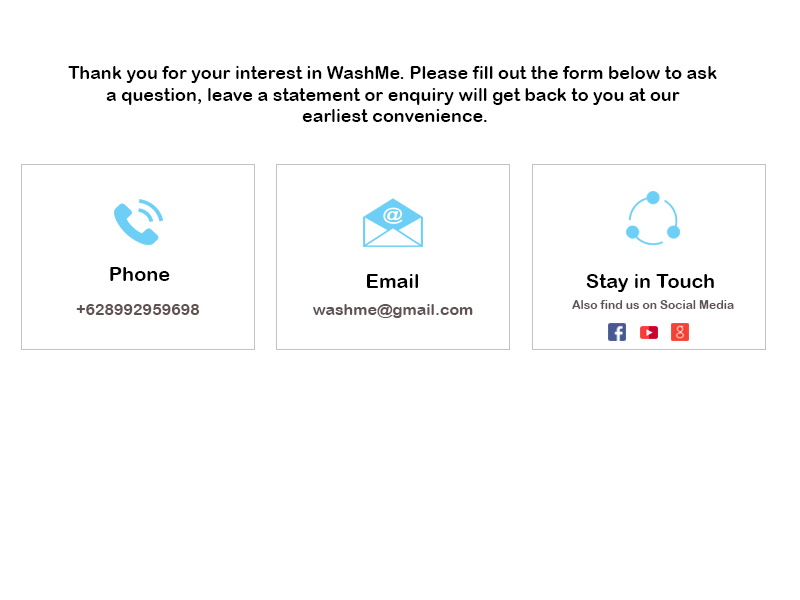
<style>
.page{position:relative;width:800px;height:600px;background:#ffffff}
.page>*{position:absolute;margin:0}
.t1{font:18px "ArialRoundedMTBold";color:#000000}
.t2{font:20px "ArialRoundedMTBold";color:#000000}
.t3{font:16px "ArialRoundedMTBold";color:#605252}
.t4{font:12px "ArialRoundedMTBold";color:#605252}
</style>
<div class="page">
<p class="t1" style="left:68px;top:66px;width:649px;height:56px;text-align:center">Thank you for your interest in WashMe. Please fill out the form below to ask <br>a question, leave a statement or enquiry will get back to you at our <br>earliest convenience.</p>
<p class="t2" style="left:110px;top:267px;width:60px;height:14px">Phone</p>
<p class="t2" style="left:367px;top:274px;width:51px;height:14px">Email</p>
<p class="t2" style="left:586px;top:274px;width:128px;height:18px">Stay in Touch</p>
<p class="t3" style="left:76px;top:304px;width:124px;height:11px">+628992959698</p>
<p class="t3" style="left:313px;top:304px;width:160px;height:14px">washme@gmail.com</p>
<p class="t4" style="left:572px;top:300px;width:162px;height:9px">Also find us on Social Media</p>
</div>
